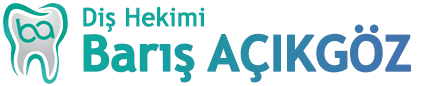
<style>
.page{position:relative;width:426px;height:86px;background:#ffffff}
.page>*{position:absolute;margin:0}
.t1{font:25px "TrebuchetMS";color:#0ea89e;font-weight:bold}
.t2{font:50px "TrebuchetMS-Bold";letter-spacing:-0.025em;font-weight:bold}
</style>
<div class="page">
<p class="t1" style="left:83px;top:7px;width:122px;height:25px">Diş Hekimi</p>
<p class="t2" style="left:83px;top:24px;width:328px;height:59px">Barış AÇIKGÖZ</p>
</div>
